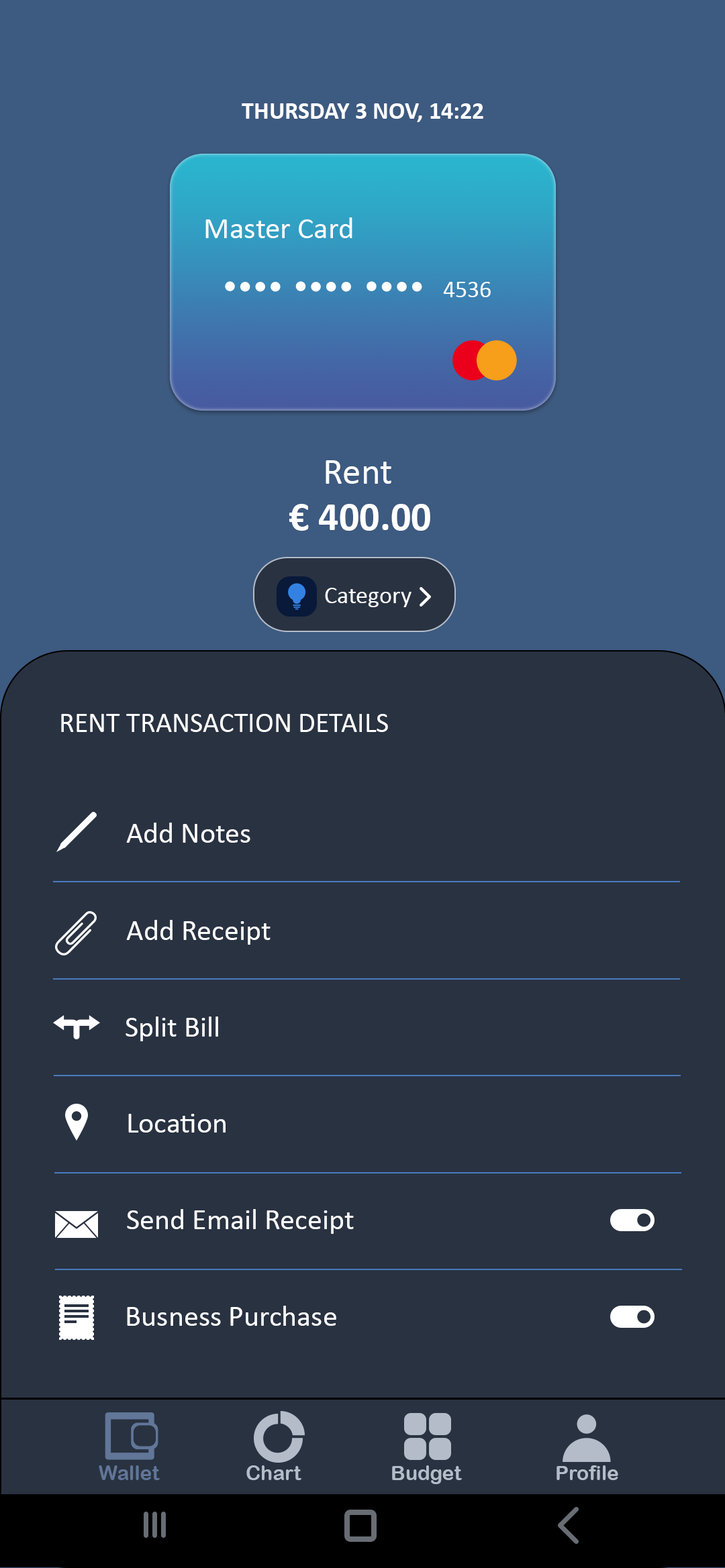
<style>
.page{position:relative;width:725px;height:1568px;background:#293241}
.page>*{position:absolute;margin:0}
.t1{font:24.2px "Calibri-Bold";color:#ffffff}
.t2{font:30.2px "Calibri";color:#ffffff}
.t3{font:24.2px "Calibri";color:#ffffff}
.t4{font:36.9px "Calibri";color:#ffffff}
.t5{font:40.3px "Calibri-Bold";color:#ffffff}
.t6{font:28.2px "Calibri";color:#ffffff}
.t7{font:29.5px "Calibri";color:#ffffff}
.t8{font:20.1px "ArialRoundedMTBold";color:#617698}
.t9{font:20.1px "ArialRoundedMTBold";color:#b4bcc9}
</style>
<div class="page">
<p class="t1" style="left:242px;top:103px;width:241px;height:19px">THURSDAY 3 NOV, 14:22</p>
<p class="t2" style="left:205px;top:217px;width:147px;height:21px">Master Card</p>
<p class="t3" style="left:443px;top:282px;width:47px;height:15px">4536</p>
<p class="t4" style="left:325px;top:460px;width:66px;height:24px">Rent</p>
<p class="t5" style="left:289px;top:504px;width:141px;height:27px">€ 400.00</p>
<p class="t3" style="left:325px;top:588px;width:86px;height:19px">Category</p>
<p class="t6" style="left:61px;top:714px;width:327px;height:18px">RENT TRANSACTION DETAILS</p>
<p class="t7" style="left:126px;top:823px;width:124px;height:20px">Add Notes</p>
<p class="t7" style="left:126px;top:920px;width:144px;height:25px">Add Receipt</p>
<p class="t7" style="left:125px;top:1016px;width:93px;height:25px">Split Bill</p>
<p class="t7" style="left:128px;top:1114px;width:97px;height:19px">Location</p>
<p class="t7" style="left:127px;top:1209px;width:227px;height:25px">Send Email Receipt</p>
<p class="t7" style="left:127px;top:1306px;width:209px;height:20px">Busness Purchase</p>
<p class="t8" style="left:99px;top:1465px;width:61px;height:15px">Wallet</p>
<p class="t9" style="left:246px;top:1465px;width:55px;height:15px">Chart</p>
<p class="t9" style="left:392px;top:1465px;width:70px;height:19px">Budget</p>
<p class="t9" style="left:556px;top:1465px;width:62px;height:15px">Profile</p>
</div>
